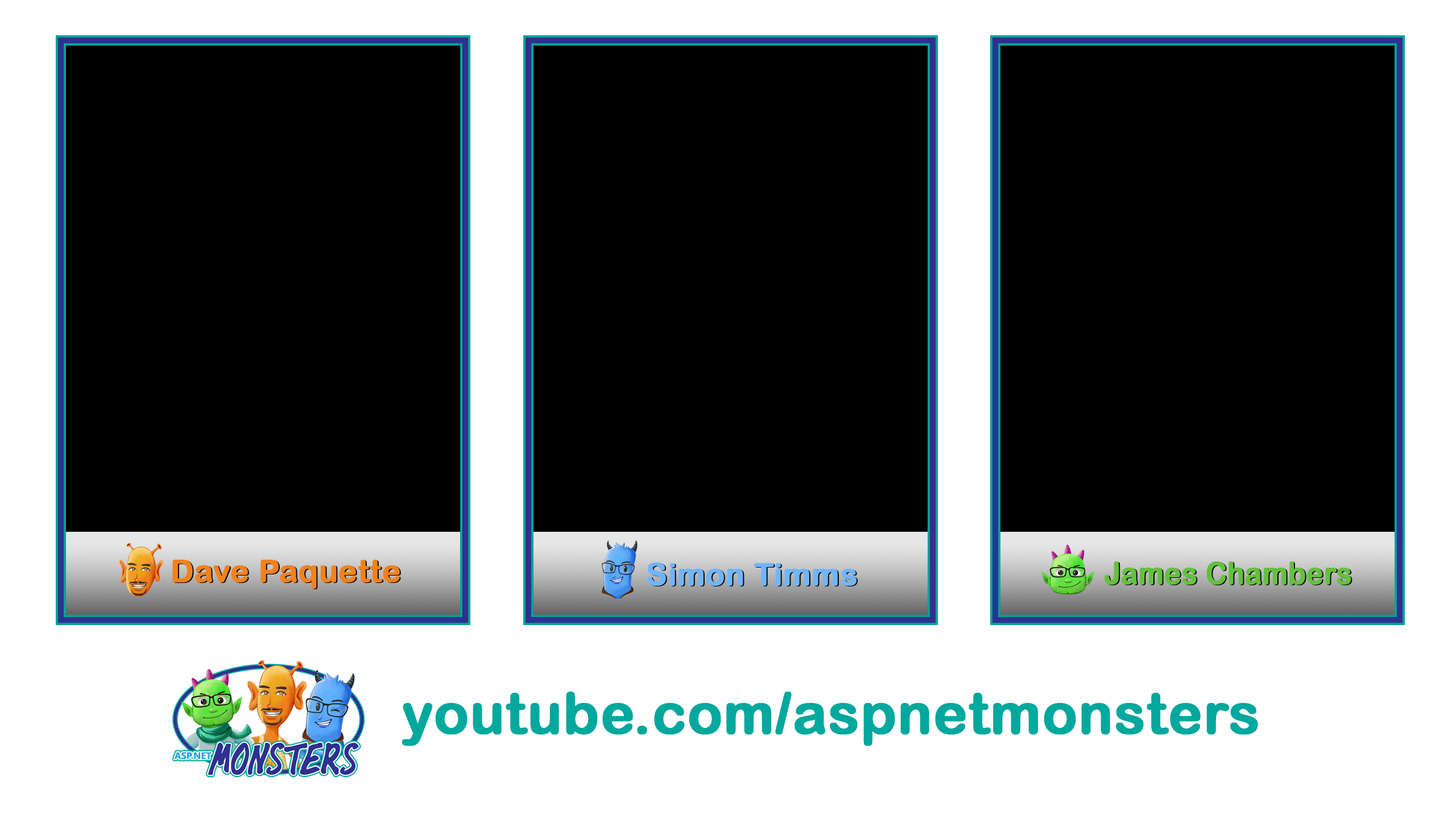
<style>
.page{position:relative;width:1456px;height:819px;background:#000000}
.page>*{position:absolute;margin:0}
.t1{font:31.3px "ArialRoundedMTBold";color:#f1821c;font-weight:bold}
.t2{font:31.3px "ArialRoundedMTBold";color:#70b5fb;font-weight:bold}
.t3{font:31.3px "ArialRoundedMTBold";color:#64c13c;font-weight:bold;scale:0.9 1}
.t4{font:56.9px "ArialRoundedMTBold";color:#00a89d;font-weight:bold}
</style>
<div class="page">
<p class="t1" style="left:172px;top:560px;width:228px;height:29px">Dave Paquette</p>
<p class="t2" style="left:647px;top:562px;width:210px;height:24px">Simon Timms</p>
<p class="t3" style="left:1104px;top:561px;width:247px;height:24px">James Chambers</p>
<p class="t4" style="left:402px;top:692px;width:856px;height:54px">youtube.com/aspnetmonsters</p>
</div>
